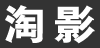
<style>
.page{position:relative;width:100px;height:48px;background:#333333}
.page>*{position:absolute;margin:0}
.t1{font:42px "FZYDCHJW--GB1-0";letter-spacing:0.38em;color:#ffffff}
</style>
<div class="page">
<p class="t1" style="left:5px;top:5px;width:90px;height:39px">淘影</p>
</div>
